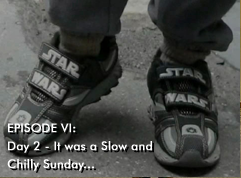
<style>
.page{position:relative;width:241px;height:178px}
.page>*{position:absolute;margin:0}
.t1{font:12px/18px "FuturaBT-Book";letter-spacing:0.01em;color:#ffffff;font-weight:bold}
</style>
<div class="page">
<p class="t1" style="left:7px;top:123px;width:145px;height:48px">EPISODE VI:<br>Day 2 - It was a Slow and<br>Chilly Sunday...</p>
</div>
